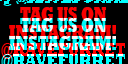
<style>
.page{position:relative;width:128px;height:64px;background:#000000}
.page>*{position:absolute;margin:0}
.t1{font:19.5px/18.1px "Rockwell-ExtraBold";scale:0.76 1}
</style>
<div class="page">
<p class="t1" style="left:9px;top:6px;width:107px;height:32px;text-align:center">TAG US ON<br>INSTAGRAM!</p>
</div>
